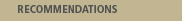
<style>
.page{position:relative;width:182px;height:21px;background:#c2b592}
.page>*{position:absolute;margin:0}
.t1{font:11px "Frutiger-BoldCn";letter-spacing:0.025em;color:#525352;text-transform:uppercase}
</style>
<div class="page">
<p class="t1" style="left:18px;top:5px;width:99px;height:8px">recommendations</p>
</div>
